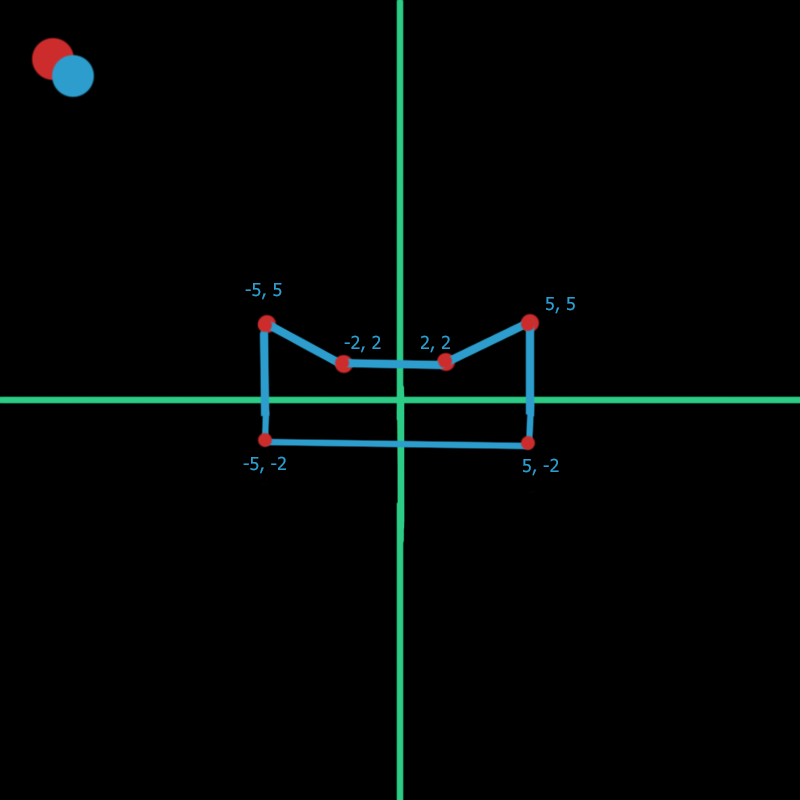
<style>
.page{position:relative;width:800px;height:800px;background:#000000}
.page>*{position:absolute;margin:0}
.t1{font:18px "Tahoma";color:#2c9dcc}
</style>
<div class="page">
<p class="t1" style="left:245px;top:283px;width:37px;height:17px">-5, 5</p>
<p class="t1" style="left:546px;top:297px;width:29px;height:17px">5, 5</p>
<p class="t1" style="left:344px;top:335px;width:37px;height:18px">-2, 2</p>
<p class="t1" style="left:421px;top:335px;width:29px;height:18px">2, 2</p>
<p class="t1" style="left:243px;top:456px;width:43px;height:18px">-5, -2</p>
<p class="t1" style="left:523px;top:458px;width:36px;height:18px">5, -2</p>
</div>
